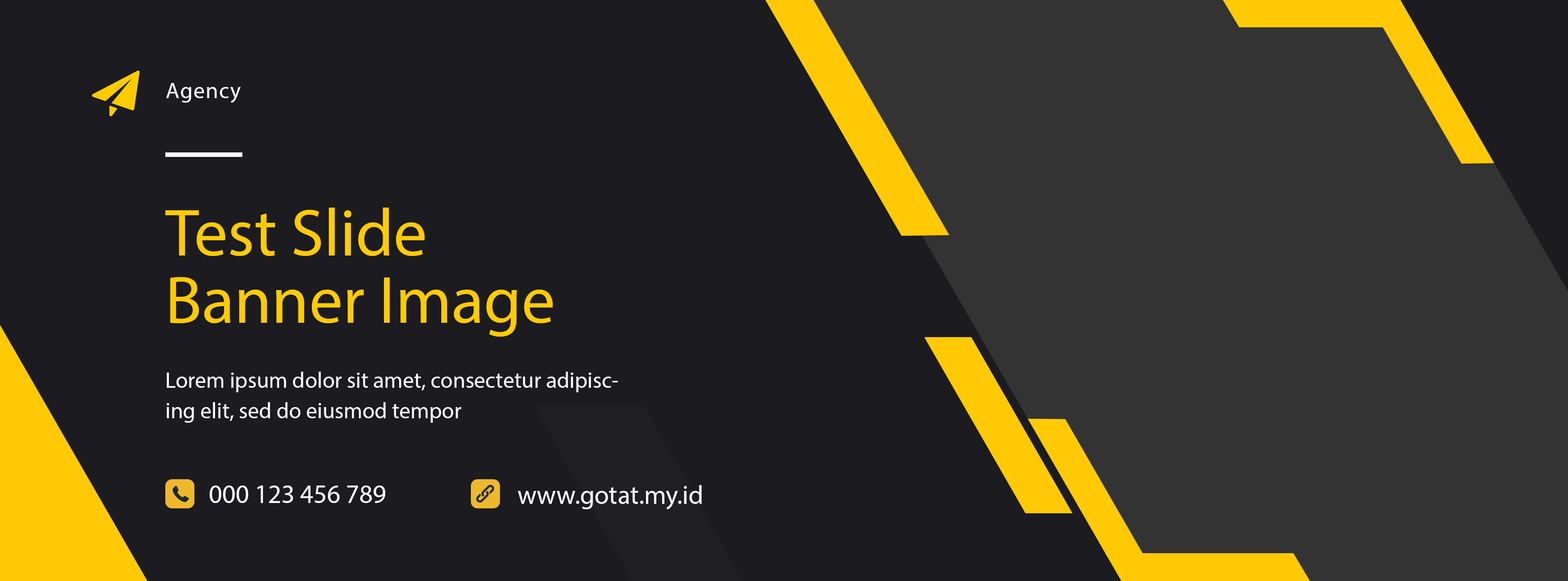
<style>
.page{position:relative;width:1568px;height:581px;background:#1b1b20}
.page>*{position:absolute;margin:0}
.t1{font:22.4px "MyriadPro-Regular";letter-spacing:0.04em;color:#ffffff}
.t2{font:67.2px/67.2px "MyriadPro-Regular";color:#fecb00}
.t3{font:22.4px/30.5px "MyriadPro-Regular";color:#ffffff}
.t4{font:26.1px "MyriadPro-Regular";color:#ffffff}
</style>
<div class="page">
<p class="t1" style="left:166px;top:83px;width:75px;height:20px">Agency</p>
<p class="t2" style="left:165px;top:207px;width:388px;height:129px">Test Slide<br>Banner Image</p>
<p class="t3" style="left:167px;top:371px;width:451px;height:51px">Lorem ipsum dolor sit amet, consectetur adipiscing elit, sed do eiusmod tempor</p>
<p class="t4" style="left:210px;top:485px;width:175px;height:18px">000 123 456 789</p>
<p class="t4" style="left:518px;top:485px;width:184px;height:24px">www.gotat.my.id</p>
</div>
